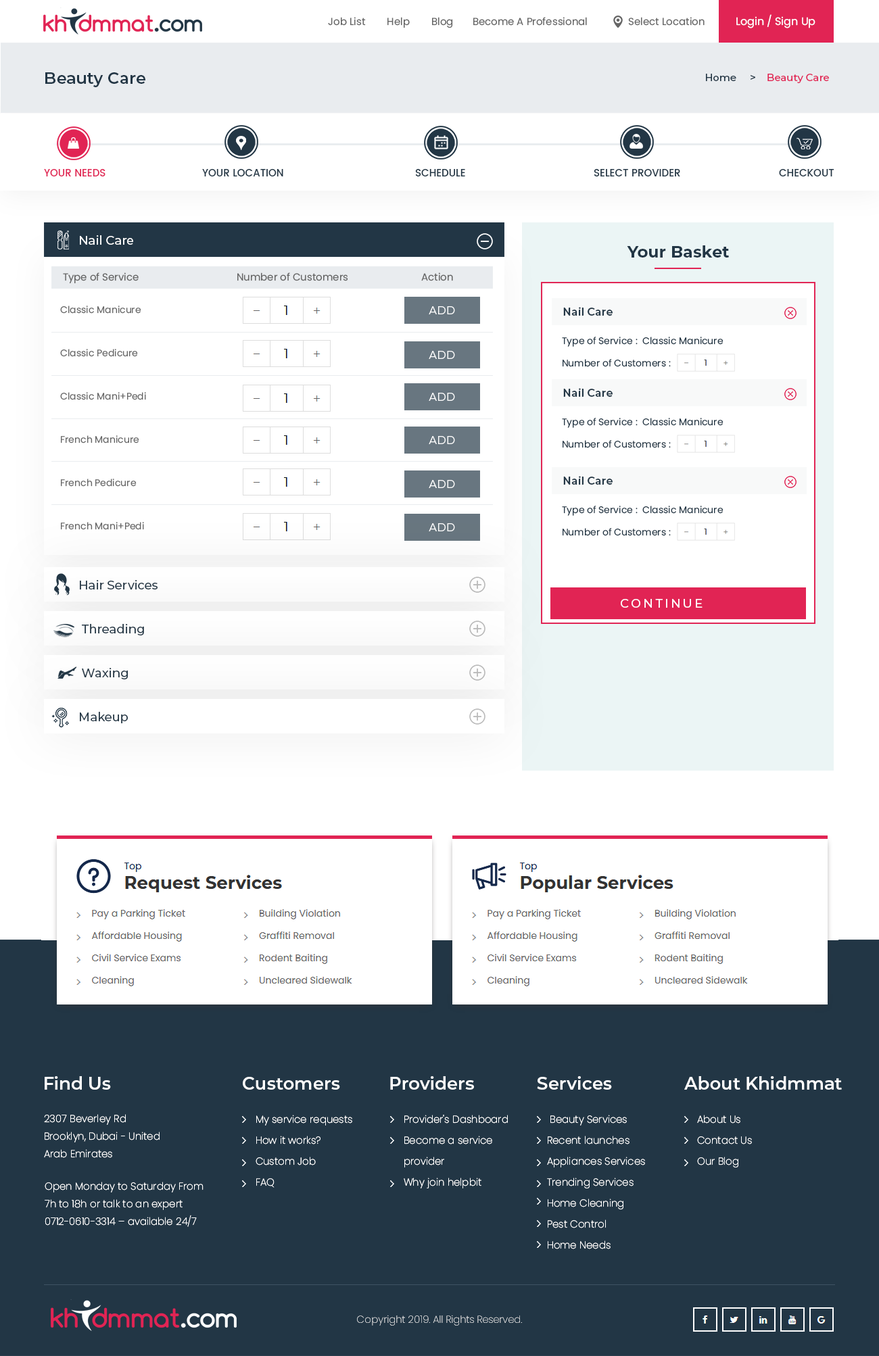
<style>
.page{position:relative;width:879px;height:1356px;background:#ffffff}
.page>*{position:absolute;margin:0}
.t1{font:10.1px "Poppins-Regular";color:#666666}
.t2{font:9.5px "Poppins-Regular";color:#666666}
.t3{font:10.8px "Poppins-Regular";color:#ffffff}
.t4{font:16.2px "Montserrat-SemiBold";color:#223645}
.t5{font:10.1px "Montserrat-Medium";color:#e12454}
.t6{font:10.1px "Montserrat-Medium";color:#05315e}
.t7{font:10.1px "Montserrat-Medium";color:#223645}
.t8{font:10.1px "Poppins-Medium";color:#e12454;text-transform:uppercase}
.t9{font:10.1px "Poppins-Medium";color:#223645;text-transform:uppercase}
.t10{font:12.2px "Montserrat-Medium";color:#ffffff}
.t11{font:16.2px "Montserrat-Bold";color:#223645}
.t12{font:9.5px/21.6px "Poppins-Regular";color:#666666}
.t13{font:10.8px "Montserrat-Regular";letter-spacing:0.02em;color:#ffffff}
.t14{font:10.8px "Montserrat-SemiBold";color:#223645}
.t15{font:9.5px "Poppins-Regular";color:#223645}
.t16{font:12.2px "Montserrat-Medium";color:#223645}
.t17{font:12.2px "Montserrat-Medium";letter-spacing:0.18em;color:#ffffff;text-transform:uppercase}
.t18{font:17.6px "Montserrat-SemiBold";color:#ffffff}
.t19{font:10.1px/17.6px "Poppins-ExtraLight";color:#ffffff}
.t20{font:10.1px/21px "Poppins-ExtraLight";color:#ffffff}
.t21{font:10.1px "Poppins-ExtraLight"}
</style>
<div class="page">
<p class="t1" style="left:328px;top:14px;width:488px;height:14px"><span class="t2">       </span> Job List        Help        Blog       Become A Professional               Select Location            <span class="t3">Login / Sign Up</span></p>
<p class="t4" style="left:45px;top:72px;width:100px;height:15px">Beauty Care</p>
<p class="t5" style="left:706px;top:74px;width:123px;height:9px"><span class="t6">    </span><span class="t7">Home     &gt;    </span>Beauty Care</p>
<p class="t8" style="left:44px;top:169px;width:61px;height:7px">Your Needs</p>
<p class="t9" style="left:202px;top:169px;width:81px;height:7px">Your Location</p>
<p class="t9" style="left:415px;top:169px;width:50px;height:7px">Schedule</p>
<p class="t9" style="left:594px;top:169px;width:86px;height:7px">Select Provider</p>
<p class="t9" style="left:779px;top:169px;width:55px;height:7px">Checkout</p>
<p class="t10" style="left:80px;top:235px;width:53px;height:10px">Nail Care</p>
<p class="t11" style="left:627px;top:245px;width:102px;height:13px">Your Basket</p>
<p class="t1" style="left:63px;top:273px;width:390px;height:10px">Type of Service                                    Number of Customers                           Action</p>
<p class="t12" style="left:60px;top:306px;width:86px;height:224px">Classic Manicure<br><br>Classic Pedicure<br><br>Classic Mani+Pedi<br><br>French Manicure<br><br>French Pedicure<br><br>French Mani+Pedi</p>
<p class="t13" style="left:429px;top:306px;width:26px;height:8px">ADD</p>
<p class="t14" style="left:563px;top:307px;width:50px;height:9px">Nail Care</p>
<p class="t15" style="left:562px;top:337px;width:162px;height:10px">Type of Service :  Classic Manicure</p>
<p class="t13" style="left:429px;top:351px;width:26px;height:8px">ADD</p>
<p class="t15" style="left:563px;top:359px;width:108px;height:8px">Number of Customers :</p>
<p class="t14" style="left:563px;top:388px;width:50px;height:9px">Nail Care</p>
<p class="t13" style="left:429px;top:393px;width:26px;height:8px">ADD</p>
<p class="t15" style="left:562px;top:418px;width:162px;height:10px">Type of Service :  Classic Manicure</p>
<p class="t13" style="left:429px;top:436px;width:26px;height:8px">ADD</p>
<p class="t15" style="left:563px;top:440px;width:108px;height:8px">Number of Customers :</p>
<p class="t13" style="left:429px;top:480px;width:26px;height:8px">ADD</p>
<p class="t14" style="left:563px;top:476px;width:50px;height:9px">Nail Care</p>
<p class="t15" style="left:562px;top:506px;width:162px;height:10px">Type of Service :  Classic Manicure</p>
<p class="t13" style="left:429px;top:523px;width:26px;height:8px">ADD</p>
<p class="t15" style="left:563px;top:528px;width:108px;height:8px">Number of Customers :</p>
<p class="t16" style="left:80px;top:580px;width:78px;height:10px">Hair Services</p>
<p class="t17" style="left:621px;top:599px;width:82px;height:9px">Continue</p>
<p class="t16" style="left:82px;top:624px;width:62px;height:12px">Threading</p>
<p class="t16" style="left:82px;top:668px;width:46px;height:12px">Waxing</p>
<p class="t16" style="left:80px;top:712px;width:48px;height:12px">Makeup</p>
<p class="t18" style="left:45px;top:1077px;width:66px;height:13px">Find Us</p>
<p class="t18" style="left:243px;top:1077px;width:97px;height:13px">Customers</p>
<p class="t18" style="left:390px;top:1077px;width:84px;height:13px">Providers</p>
<p class="t18" style="left:537px;top:1077px;width:75px;height:13px">Services</p>
<p class="t18" style="left:684px;top:1077px;width:158px;height:13px">About Khidmmat</p>
<p class="t19" style="left:44px;top:1114px;width:116px;height:44px">2307 Beverley Rd<br>Brooklyn, Dubai - United Arab Emirates</p>
<p class="t20" style="left:256px;top:1115px;width:96px;height:73px">My service requests<br>    How it works?<br>    Custom Job<br>    FAQ</p>
<p class="t20" style="left:404px;top:1115px;width:104px;height:74px">Provider's Dashboard<br>    Become a service <br>    provider<br>    Why join helpbit</p>
<p class="t20" style="left:547px;top:1115px;width:98px;height:135px">Beauty Services <br>Recent launches <br>Appliances Services Trending Services <br>Home Cleaning <br>Pest Control <br>Home Needs</p>
<p class="t20" style="left:697px;top:1115px;width:55px;height:53px">About Us<br> Contact Us<br> Our Blog</p>
<p class="t19" style="left:45px;top:1182px;width:159px;height:45px">Open Monday to Saturday From 7h to 18h or talk to an expert 0712-0610-3314 – available 24/7</p>
<p class="t21" style="left:357px;top:1315px;width:165px;height:11px">Copyright 2019. All Rights Reserved.</p>
</div>
